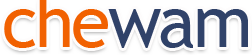
<style>
.page{position:relative;width:252px;height:55px;background:#ffffff}
.page>*{position:absolute;margin:0}
.t1{font:72px "TrebuchetMS";letter-spacing:-0.04em;color:#f26101}
.t2{font:72px "TrebuchetMS";letter-spacing:-0.04em;color:#304269}
</style>
<div class="page">
<p class="t1" style="left:4px;top:0px;width:244px;height:48px">che<span class="t2">wam</span></p>
</div>
